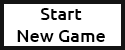
<style>
.page{position:relative;width:125px;height:50px;background:#ffffff}
.page>*{position:absolute;margin:0}
.t1{font:18px "Ubuntu-Medium";color:#000000}
</style>
<div class="page">
<p class="t1" style="left:17px;top:8px;width:88px;height:34px;text-align:center">Start<br>New Game</p>
</div>
